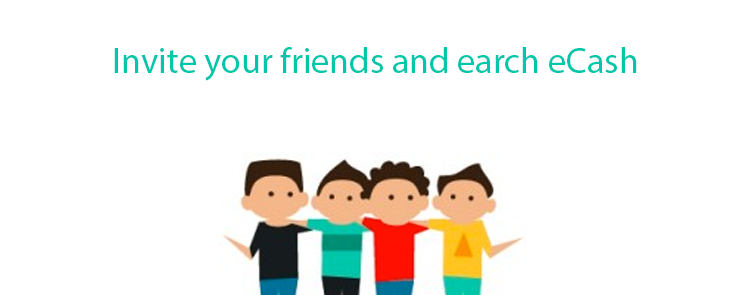
<style>
.page{position:relative;width:750px;height:295px;background:#ffffff}
.page>*{position:absolute;margin:0}
.t1{font:36.1px "MyriadPro-Regular";color:#00c7a9}
</style>
<div class="page">
<p class="t1" style="left:114px;top:47px;width:523px;height:34px">Invite your friends and earch eCash</p>
</div>
